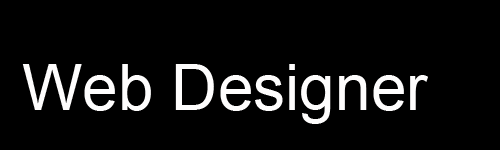
<style>
.page{position:relative;width:500px;height:150px;background:#000000}
.page>*{position:absolute;margin:0}
.t1{font:64px "ArialMT";color:#fefdfd}
</style>
<div class="page">
<p class="t1" style="left:22px;top:64px;width:406px;height:60px">Web Designer</p>
</div>
